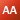
<style>
.page{position:relative;width:20px;height:20px}
.page>*{position:absolute;margin:0}
.t1{font:12px "FranklinGothic-Medium";color:#ffffff}
</style>
<div class="page">
<p class="t1" style="left:2px;top:6px;width:15px;height:8px">AA</p>
</div>
